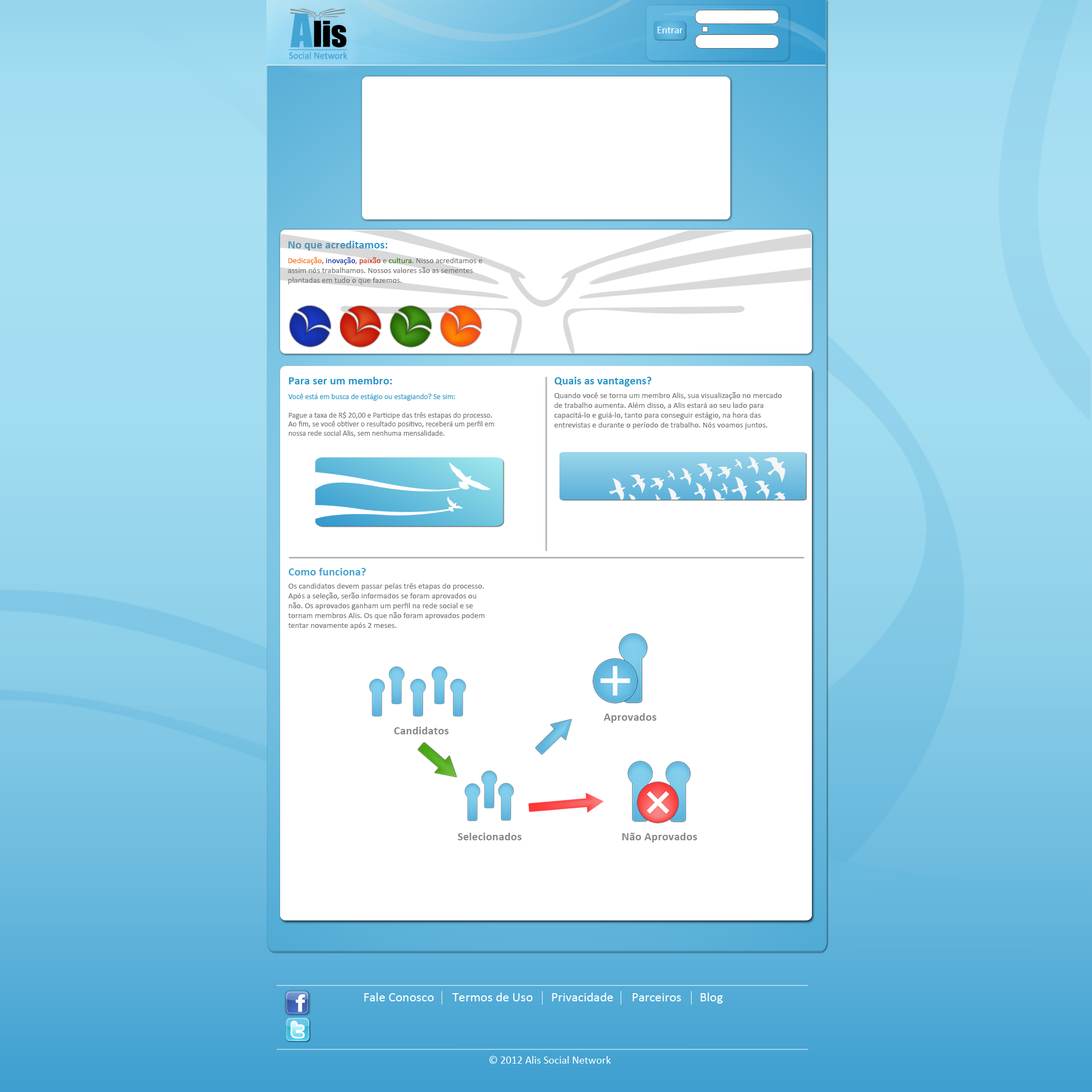
<style>
.page{position:relative;width:1092px;height:1092px;background:#ffffff}
.page>*{position:absolute;margin:0}
.t1{font:10.2px "Calibri";letter-spacing:0.005em;color:#ffffff}
.t2{font:11.5px "Calibri-Bold";letter-spacing:0.005em}
.t3{font:8.2px "Calibri";color:#757575}
.t4{font:8.2px "Calibri";color:#f9690d}
.t5{font:8.2px "Calibri";color:#172f9f}
.t6{font:8.2px "Calibri";color:#ca250f}
.t7{font:8.2px "Calibri";color:#357c0f}
.t8{font:11.5px "Calibri-Bold";letter-spacing:0.005em;color:#2c96c7}
.t9{font:7.6px "Calibri";color:#757575}
.t10{font:7.6px "Calibri";color:#2c96c7}
.t11{font:11.5px "Calibri-Bold";letter-spacing:0.005em;color:#48a4ce}
.t12{font:11.7px "Calibri-Bold";letter-spacing:0.005em;color:#878787}
.t13{font:13.1px "Calibri";letter-spacing:0.005em;color:#ffffff}
.t14{font:10.9px "Calibri";letter-spacing:0.005em;color:#ffffff}
</style>
<div class="page">
<p class="t1" style="left:657px;top:27px;width:26px;height:6px">Entrar</p>
<p class="t2" style="left:288px;top:241px;width:100px;height:10px">No que acreditamos:</p>
<p class="t3" style="left:288px;top:257px;width:195px;height:27px"><span class="t4">Dedicação</span>,<span class="t5"> inovação</span>, <span class="t6">paixão</span> e <span class="t7">cultura</span>. Nisso acreditamos e assim nós trabalhamos. Nossos valores são as sementes plantadas em tudo o que fazemos.</p>
<p class="t8" style="left:289px;top:377px;width:103px;height:7px">Para ser um membro:</p>
<p class="t8" style="left:554px;top:377px;width:97px;height:10px">Quais as vantagens?</p>
<p class="t9" style="left:288px;top:394px;width:206px;height:43px"><span class="t10">Você está em busca de estágio ou estagiando? Se sim:<br></span><br>Pague a taxa de R$ 20,00 e Participe das três estapas do processo. Ao fim, se você obtiver o resultado positivo, receberá um perfil em nossa rede social Alis, sem nenhuma mensalidade.</p>
<p class="t3" style="left:554px;top:392px;width:228px;height:37px">Quando você se torna um membro Alis, sua visualização no mercado de trabalho aumenta. Além disso, a Alis estará ao seu lado para capacitá-lo e guiá-lo, tanto para conseguir estágio, na hora das entrevistas e durante o período de trabalho. Nós voamos juntos.</p>
<p class="t11" style="left:288px;top:568px;width:78px;height:7px">Como funciona?</p>
<p class="t3" style="left:288px;top:583px;width:197px;height:47px">Os candidatos devem passar pelas três etapas do processo. Após a seleção, serão informados se foram aprovados ou não. Os aprovados ganham um perfil na rede social e se tornam membros Alis. Os que não foram aprovados podem tentar novamente após 2 meses.</p>
<p class="t12" style="left:604px;top:713px;width:52px;height:10px">Aprovados</p>
<p class="t12" style="left:394px;top:727px;width:55px;height:7px">Candidatos</p>
<p class="t12" style="left:458px;top:833px;width:63px;height:7px">Selecionados</p>
<p class="t12" style="left:622px;top:833px;width:75px;height:9px">Não Aprovados</p>
<p class="t13" style="left:364px;top:993px;width:359px;height:11px">Fale Conosco      Termos de Uso      Privacidade      Parceiros      Blog</p>
<p class="t14" style="left:489px;top:1056px;width:122px;height:8px">© 2012 Alis Social Network</p>
</div>
